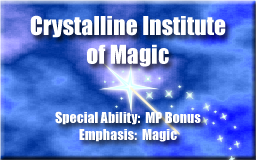
<style>
.page{position:relative;width:256px;height:160px}
.page>*{position:absolute;margin:0}
.t1{font:24px "Impact";color:#ffffff}
.t2{font:14px "Impact";color:#ffffff}
</style>
<div class="page">
<p class="t1" style="left:30px;top:15px;width:196px;height:52px;text-align:center">Crystalline Institute<br>of Magic</p>
<p class="t2" style="left:55px;top:111px;width:146px;height:14px">Special Ability:  MP Bonus</p>
<p class="t2" style="left:79px;top:129px;width:98px;height:13px">Emphasis:  Magic</p>
</div>
